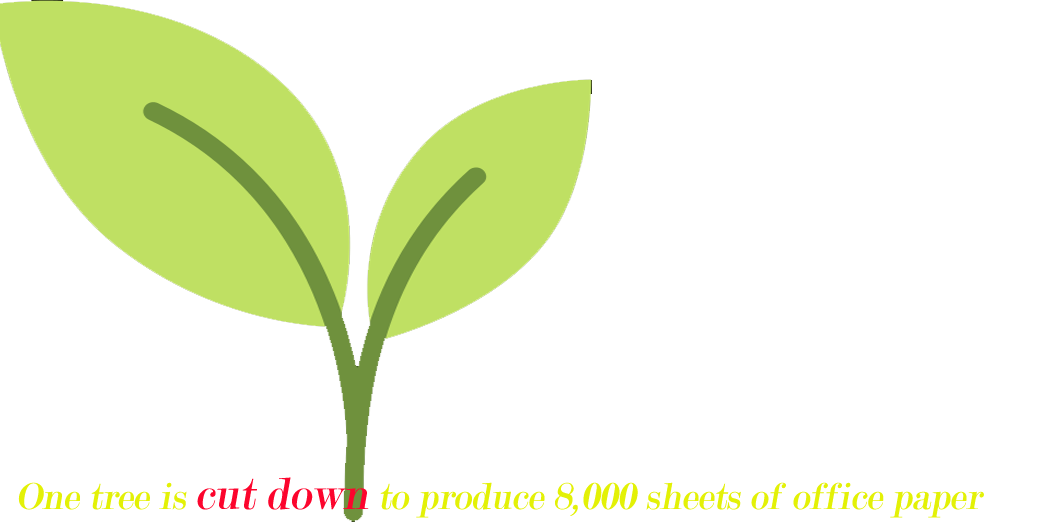
<style>
.page{position:relative;width:1060px;height:522px;background:#ffffff}
.page>*{position:absolute;margin:0}
.t1{font:40px "Modern-Regular";color:#e3f106;font-style:italic}
.t2{font:48px "Modern-Regular";color:#fc052d;font-style:italic}
</style>
<div class="page">
<p class="t1" style="left:18px;top:477px;width:966px;height:41px">One tree is <span class="t2">cut down</span> to produce 8,000 sheets of office paper</p>
</div>
